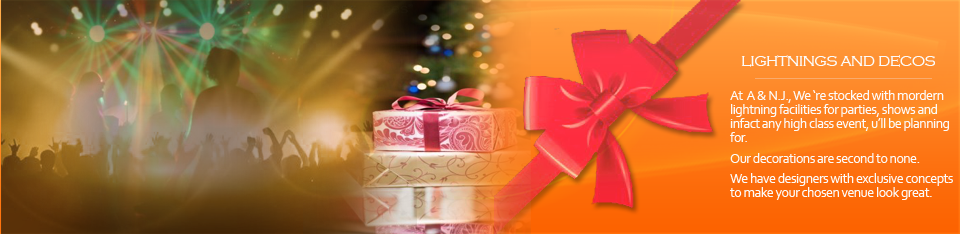
<style>
.page{position:relative;width:960px;height:234px}
.page>*{position:absolute;margin:0}
.t1{font:18px "CopperplateGothic-Light";letter-spacing:-0.04em;color:#fcfbfa}
.t2{font:14px/6.9px "Corbel";letter-spacing:-0.04em;color:#fcfbfa}
</style>
<div class="page">
<p class="t1" style="left:741px;top:55px;width:194px;height:12px">lightnings and decos</p>
<p class="t2" style="left:730px;top:90px;width:223px;height:110px">At  A &amp; N.J., We ‘re stocked with mordern <br><br>lightning facilities for parties, shows and <br><br>infact any high class event, u’ll be planning<br><br>for. <br><br><br>Our decorations are second to none. <br><br><br>We have designers with exclusive concepts<br><br>to make your chosen venue look great.</p>
</div>
